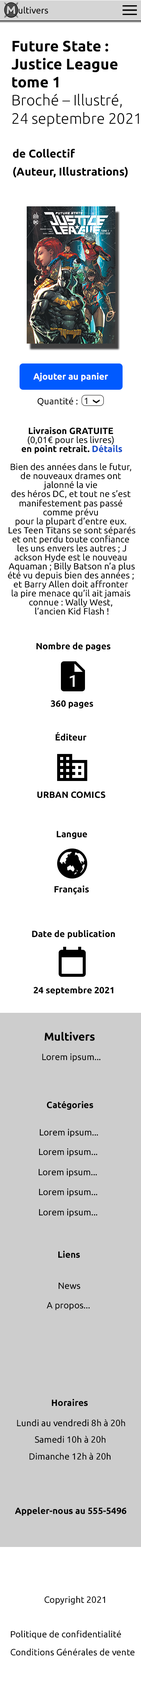
<style>
.page{position:relative;width:141px;height:1688px;background:#ffffff}
.page>*{position:absolute;margin:0}
.t1{font:9px "Ubuntu-Regular";color:#000000}
.t2{font:15.1px/9px "Ubuntu-Bold";color:#000000}
.t3{font:15.1px/9px "Ubuntu-Light";color:#000000}
.t4{font:11.2px/9px "Ubuntu-Bold";color:#000000}
.t5{font:9px "Ubuntu-Bold";color:#ffffff}
.t6{font:9px/9px "Ubuntu-Regular";color:#000000}
.t7{font:9px/9px "Ubuntu-Bold";color:#000000}
.t8{font:9px/9px "Ubuntu-Bold";color:#144bc9}
.t9{font:9px "Ubuntu-Bold";color:#000000}
.t10{font:11.2px "Ubuntu-Bold";color:#000000}
</style>
<div class="page">
<p class="t1" style="left:10px;top:6px;width:38px;height:8px">Multivers</p>
<p class="t2" style="left:11px;top:40px;width:127px;height:87px">Future State : <br><br>Justice League<br><br>tome 1<span class="t3"> <br><br>Broché – Illustré,<br> <br>24 septembre 2021</span></p>
<p class="t4" style="left:13px;top:148px;width:115px;height:30px">de Collectif <br><br>(Auteur, Illustrations)</p>
<p class="t5" style="left:33px;top:372px;width:75px;height:9px">Ajouter au panier</p>
<p class="t1" style="left:38px;top:397px;width:39px;height:9px">Quantité :</p>
<p class="t1" style="left:84px;top:398px;width:3px;height:6px">1</p>
<p class="t6" style="left:8px;top:427px;width:127px;height:188px;text-align:center"><span class="t7">Livraison GRATUITE <br></span>(0,01€ pour les livres) <br><span class="t7">en point retrait. </span><span class="t8">Détails<br><br></span>Bien des années dans le futur, <br>de nouveaux drames ont <br>jalonné la vie <br>des héros DC, et tout ne s’est <br>manifestement pas passé <br>comme prévu <br>pour la plupart d’entre eux. <br>Les Teen Titans se sont séparés<br>et ont perdu toute confiance <br>les uns envers les autres ; J<br>ackson Hyde est le nouveau <br>Aquaman ; Billy Batson n’a plus<br>été vu depuis bien des années ; <br>et Barry Allen doit affronter <br>la pire menace qu’il ait jamais <br>connue : Wally West, <br>l’ancien Kid Flash !</p>
<p class="t9" style="left:36px;top:642px;width:74px;height:9px">Nombre de pages</p>
<p class="t9" style="left:51px;top:700px;width:42px;height:8px">360 pages</p>
<p class="t9" style="left:56px;top:732px;width:30px;height:9px">Éditeur</p>
<p class="t9" style="left:37px;top:791px;width:68px;height:7px">URBAN COMICS</p>
<p class="t9" style="left:57px;top:831px;width:30px;height:8px">Langue</p>
<p class="t9" style="left:54px;top:885px;width:35px;height:9px">Français</p>
<p class="t9" style="left:32px;top:930px;width:83px;height:9px">Date de publication</p>
<p class="t9" style="left:33px;top:986px;width:80px;height:9px">24 septembre 2021</p>
<p class="t10" style="left:44px;top:1031px;width:50px;height:10px">Multivers</p>
<p class="t1" style="left:42px;top:1053px;width:58px;height:9px">Lorem ipsum...</p>
<p class="t9" style="left:46px;top:1101px;width:47px;height:9px">Catégories</p>
<p class="t1" style="left:40px;top:1128px;width:58px;height:9px">Lorem ipsum...</p>
<p class="t1" style="left:39px;top:1148px;width:58px;height:8px">Lorem ipsum...</p>
<p class="t1" style="left:39px;top:1168px;width:58px;height:9px">Lorem ipsum...</p>
<p class="t1" style="left:39px;top:1188px;width:58px;height:9px">Lorem ipsum...</p>
<p class="t1" style="left:39px;top:1208px;width:58px;height:9px">Lorem ipsum...</p>
<p class="t9" style="left:58px;top:1250px;width:22px;height:8px">Liens</p>
<p class="t1" style="left:58px;top:1282px;width:22px;height:7px">News</p>
<p class="t1" style="left:46px;top:1302px;width:44px;height:8px">A propos...</p>
<p class="t9" style="left:52px;top:1398px;width:36px;height:8px">Horaires</p>
<p class="t1" style="left:17px;top:1419px;width:108px;height:7px">Lundi au vendredi 8h à 20h</p>
<p class="t1" style="left:34px;top:1435px;width:71px;height:8px">Samedi 10h à 20h</p>
<p class="t1" style="left:29px;top:1452px;width:81px;height:8px">Dimanche 12h à 20h</p>
<p class="t9" style="left:15px;top:1506px;width:111px;height:9px">Appeler-nous au 555-5496</p>
<p class="t1" style="left:44px;top:1595px;width:61px;height:9px">Copyright 2021</p>
<p class="t6" style="left:10px;top:1630px;width:124px;height:25px">Politique de confidentialité<br><br>Conditions Générales de vente</p>
</div>
